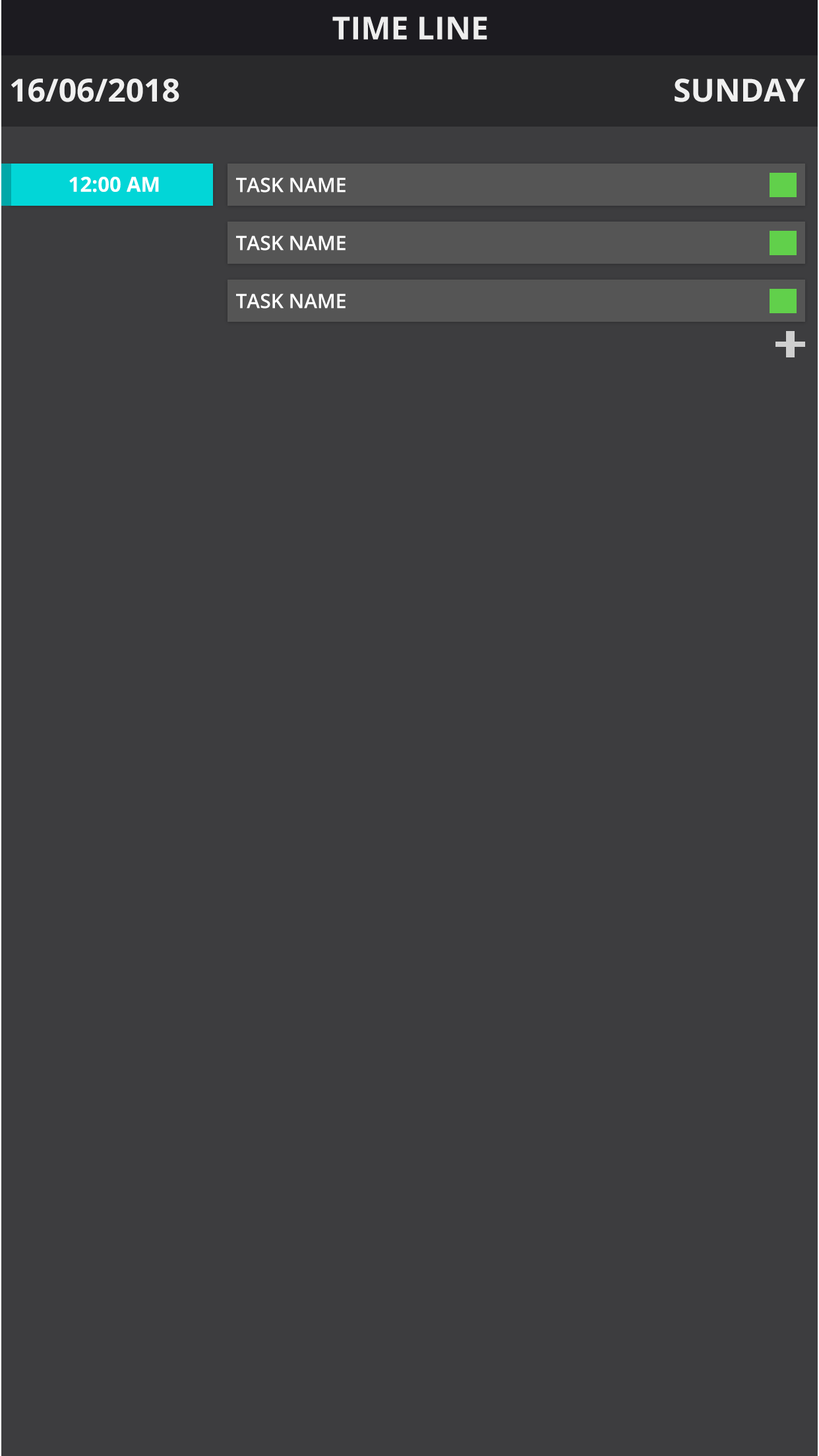
<style>
.page{position:relative;width:819px;height:1456px;background:#3d3d3f}
.page>*{position:absolute;margin:0}
.t1{font:31.7px "OpenSans-Bold";color:#f0f0f0}
.t2{font:20.6px "OpenSans-Bold";color:#ffffff}
.t3{font:19.8px "OpenSans-Semibold";color:#ffffff}
</style>
<div class="page">
<p class="t1" style="left:11px;top:78px;width:795px;height:24px">16/06/2018                                                            SUNDAY</p>
<p class="t2" style="left:69px;top:177px;width:90px;height:16px">12:00 AM</p>
<p class="t3" style="left:236px;top:177px;width:110px;height:16px">TASK NAME</p>
<p class="t3" style="left:236px;top:235px;width:110px;height:16px">TASK NAME</p>
<p class="t3" style="left:236px;top:293px;width:110px;height:16px">TASK NAME</p>
</div>
